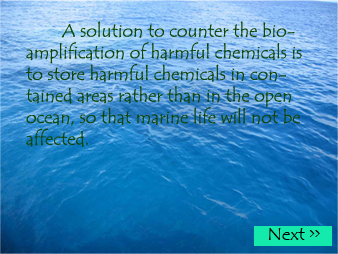
<style>
.page{position:relative;width:338px;height:254px}
.page>*{position:absolute;margin:0}
.t1{font:18px "TempusSansITC";color:#104607}
</style>
<div class="page">
<p class="t1" style="left:25px;top:21px;width:277px;height:126px">A solution to counter the bioamplification of harmful chemicals is to store harmful chemicals in contained areas rather than in the open ocean, so that marine life will not be affected.</p>
</div>
